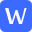
<style>
.page{position:relative;width:32px;height:32px;background:#3c6aff}
.page>*{position:absolute;margin:0}
.t1{font:35.8px "MoolBoran";color:#ffffff}
</style>
<div class="page">
<p class="t1" style="left:5px;top:8px;width:22px;height:16px">W</p>
</div>
